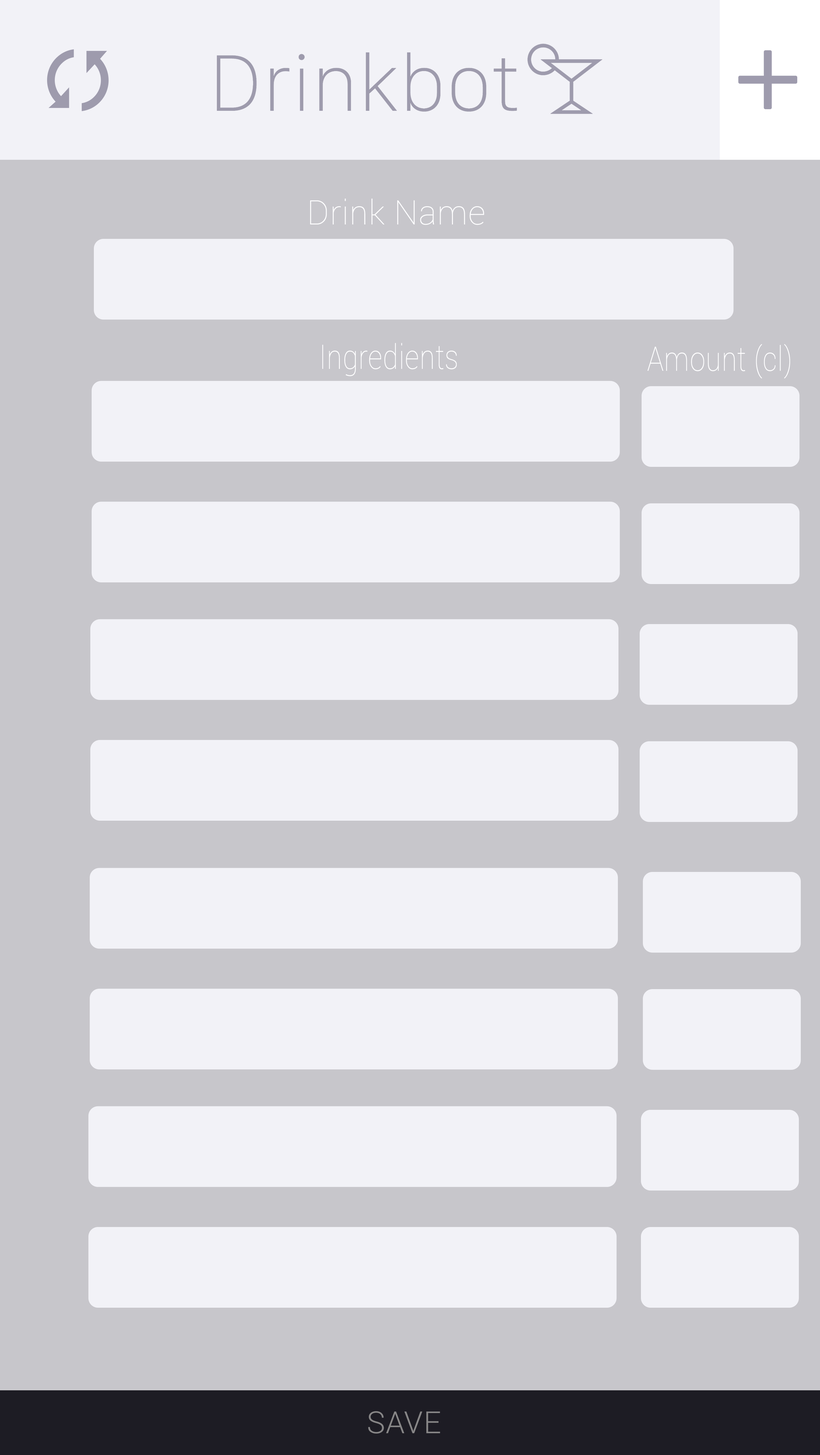
<style>
.page{position:relative;width:820px;height:1455px;background:#f2f2f7}
.page>*{position:absolute;margin:0}
.t1{font:33.9px "Roboto-Thin";letter-spacing:0.02em;color:#fefeff}
.t2{font:33.9px "Roboto-Thin";letter-spacing:0.02em;color:#fefeff;scale:0.83 1}
.t3{font:30.5px "Roboto-Light";letter-spacing:0.02em;color:#878687}
</style>
<div class="page">
<p class="t1" style="left:310px;top:199px;width:174px;height:26px">Drink Name</p>
<p class="t2" style="left:322px;top:343px;width:135px;height:33px">Ingredients</p>
<p class="t2" style="left:647px;top:344px;width:143px;height:34px">Amount (cl)</p>
<p class="t3" style="left:368px;top:1411px;width:72px;height:22px">SAVE</p>
</div>
